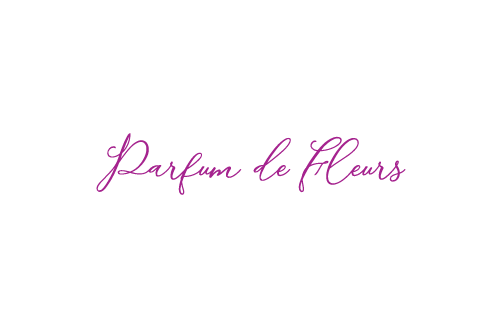
<style>
.page{position:relative;width:500px;height:324px;background:#ffffff}
.page>*{position:absolute;margin:0}
.t1{font:70px "Modennta";color:#a5238e}
</style>
<div class="page">
<p class="t1" style="left:96px;top:133px;width:310px;height:62px">Parfum de Fleurs</p>
</div>
